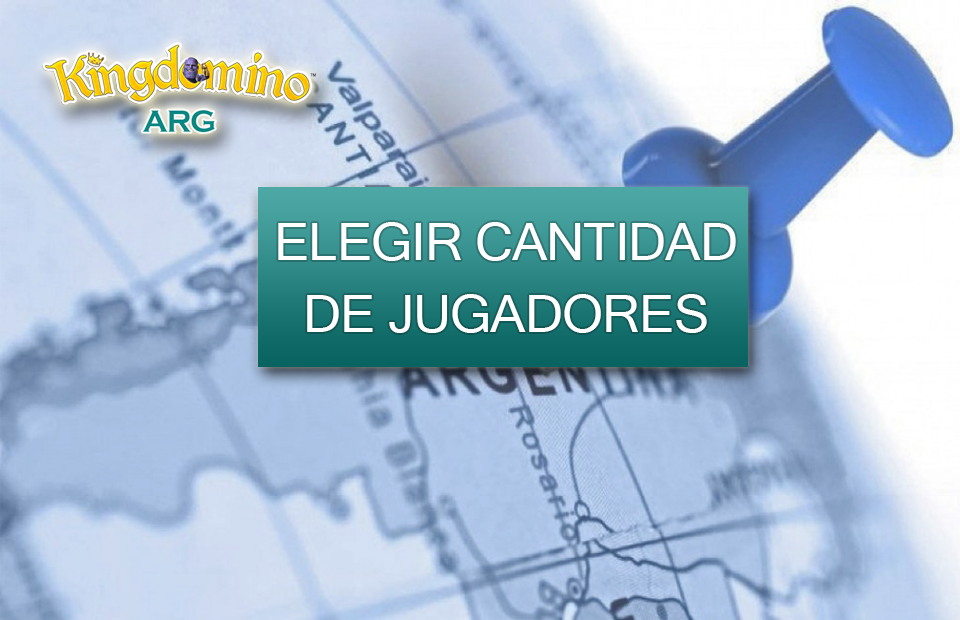
<style>
.page{position:relative;width:960px;height:620px}
.page>*{position:absolute;margin:0}
.t1{font:52.1px/71.9px "MicrosoftSansSerif";letter-spacing:-0.025em;color:#ffffff}
</style>
<div class="page">
<p class="t1" style="left:278px;top:222px;width:458px;height:111px;text-align:center">ELEGIR CANTIDAD<br>DE JUGADORES</p>
</div>
